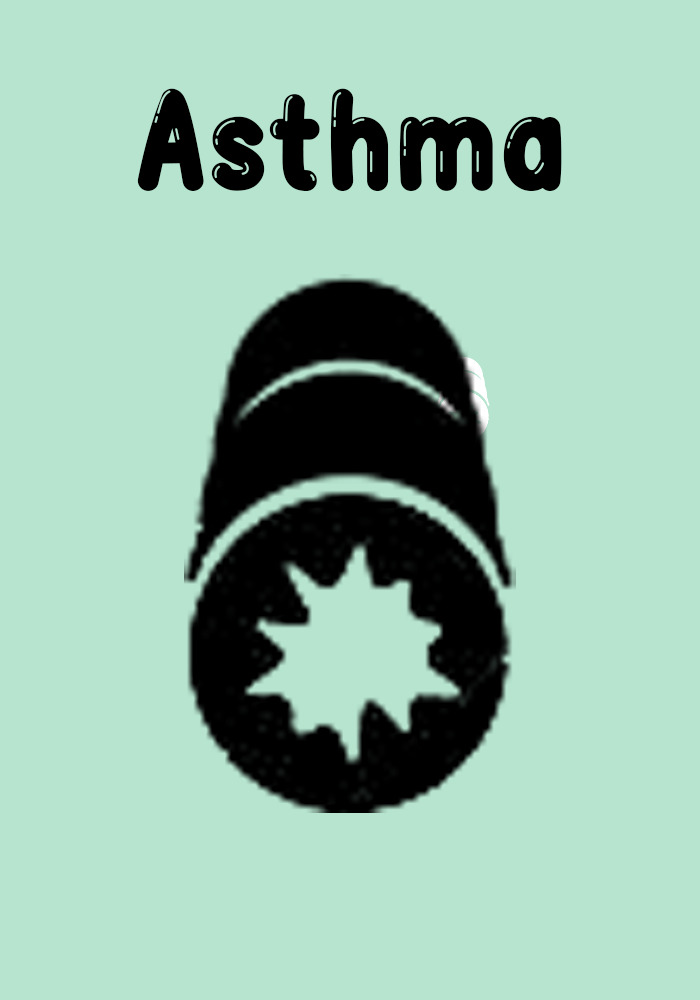
<style>
.page{position:relative;width:700px;height:1000px;background:#b6e4cf}
.page>*{position:absolute;margin:0}
.t1{font:145.8px "BubbleBobble";color:#000000}
</style>
<div class="page">
<p class="t1" style="left:137px;top:88px;width:425px;height:103px">Asthma</p>
</div>
